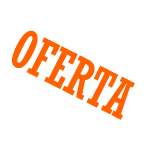
<style>
.page{position:relative;width:150px;height:150px;background:#ffffff}
.page>*{position:absolute;margin:0}
.t1{font:52.6px "Rockwell-Condensed";color:#ff6100}
</style>
<div class="page">
<p class="t1" style="left:12px;top:30px;width:123px;height:90px;rotate:27deg">OFERTA</p>
</div>
